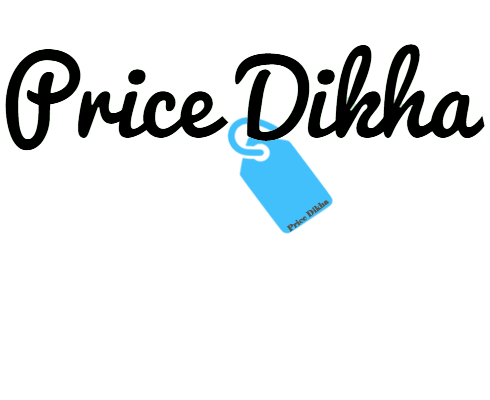
<style>
.page{position:relative;width:490px;height:400px;background:#ffffff}
.page>*{position:absolute;margin:0}
.t1{font:8px "Elephant-Regular";color:#52554e}
</style>
<div class="page">
<p class="t1" style="left:286px;top:200px;width:43px;height:32px;rotate:-37deg">Price Dikha</p>
</div>
